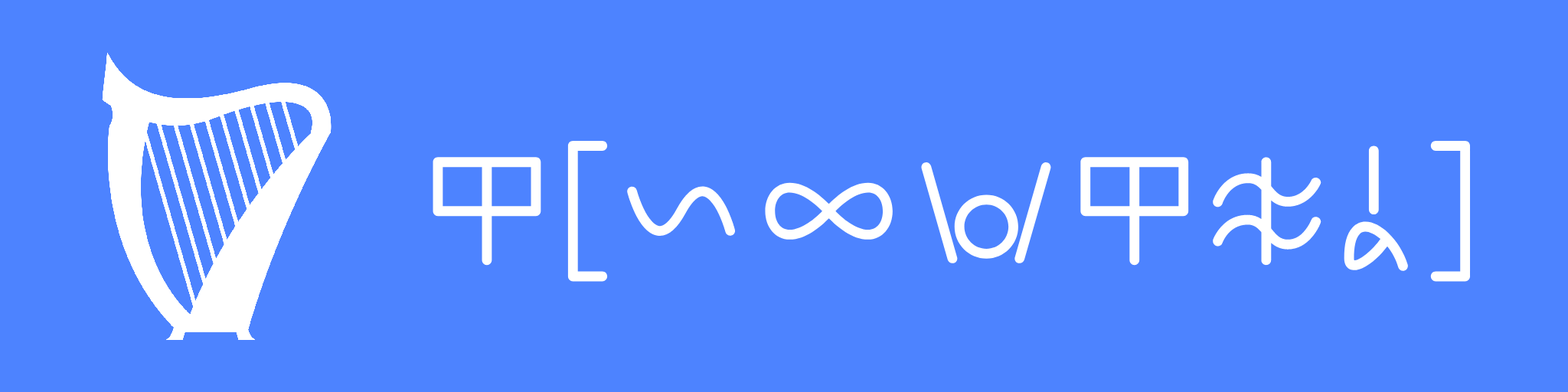
<style>
.page{position:relative;width:1568px;height:392px;background:#4d83ff}
.page>*{position:absolute;margin:0}
.t1{font:196px "linjasuwi";color:#ffffff}
</style>
<div class="page">
<p class="t1" style="left:433px;top:141px;width:1038px;height:141px">ilo[linjaalewawailojasimaa]</p>
</div>
